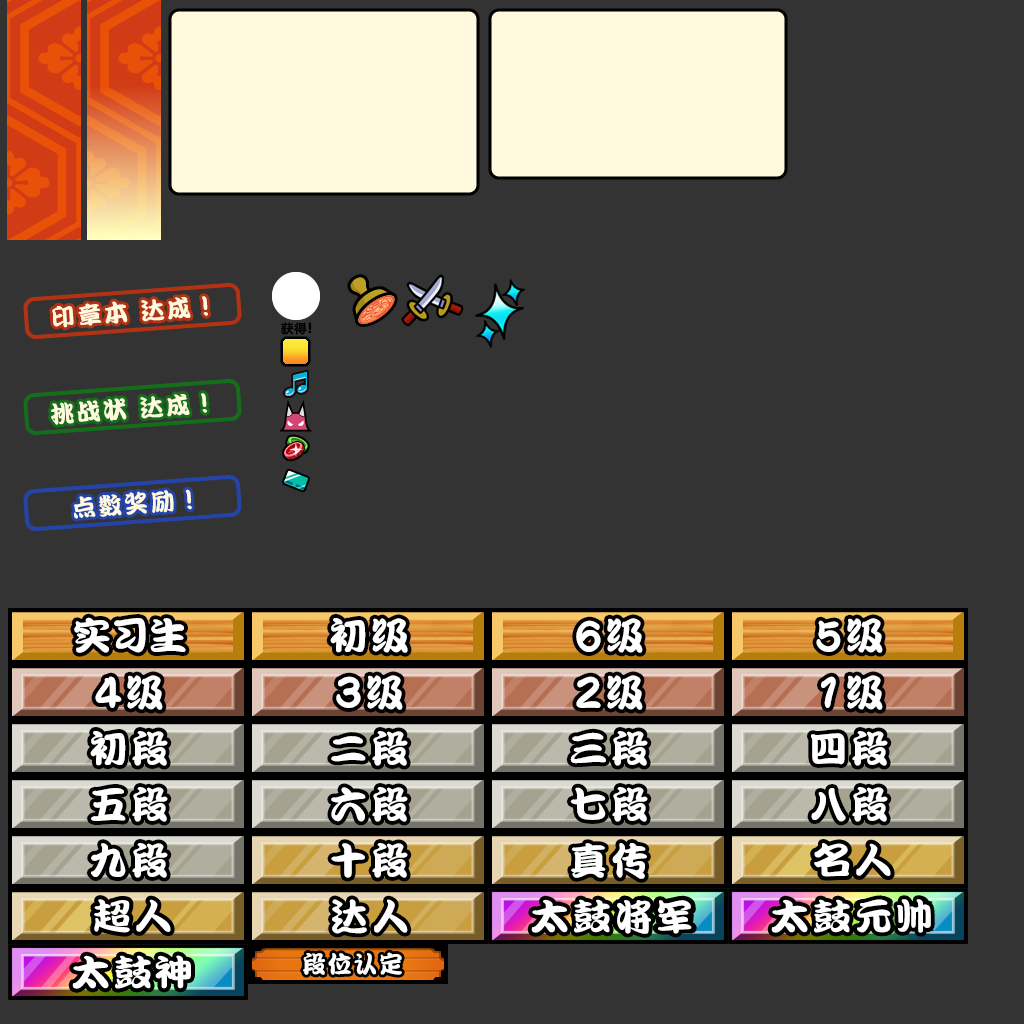
<style>
.page{position:relative;width:1024px;height:1024px;background:#333333}
.page>*{position:absolute;margin:0}
.t1{font:24px "DFPKanTingLiuW9";letter-spacing:0.1em;color:#fff9de}
.t2{font:12px "MicrosoftYaHei";letter-spacing:0.07em;color:#000000;font-weight:bold}
.t3{font:13px "MicrosoftYaHei";letter-spacing:0.07em;color:#000000;font-weight:bold}
.t4{font:24px "DFPKanTingLiuW9";color:#fff9de}
.t5{font:38px "DFPKanTingLiuW9";color:#ffffff}
.t6{font:38px "DFPKanTingLiuW9";letter-spacing:0.09em;color:#ffffff}
.t7{font:45.6px "DFPKanTingLiuW9";letter-spacing:0.09em;color:#ffffff;scale:0.83 1}
.t8{font:37px "DFPKanTingLiuW9";letter-spacing:0.09em;color:#ffffff}
.t9{font:24px "DFPKanTingLiuW9";letter-spacing:0.07em;color:#ffffff}
</style>
<div class="page">
<p class="t1" style="left:52px;top:296px;width:156px;height:32px;rotate:-4deg">印章本 达成！</p>
<p class="t2" style="left:281px;top:322px;width:30px;height:13px">获得<span class="t3">!</span></p>
<p class="t1" style="left:51px;top:393px;width:156px;height:32px;rotate:-4deg">挑战状 达成！</p>
<p class="t1" style="left:74px;top:489px;width:118px;height:30px;rotate:-4deg">点数奖励<span class="t4">！</span></p>
<p class="t5" style="left:74px;top:617px;width:112px;height:36px">实习生</p>
<p class="t6" style="left:330px;top:618px;width:78px;height:35px">初级</p>
<p class="t7" style="left:576px;top:618px;width:67px;height:35px">6<span class="t6">级</span></p>
<p class="t7" style="left:816px;top:618px;width:67px;height:35px">5<span class="t6">级</span></p>
<p class="t7" style="left:95px;top:675px;width:68px;height:35px">4<span class="t6">级</span></p>
<p class="t7" style="left:336px;top:675px;width:67px;height:35px">3<span class="t6">级</span></p>
<p class="t7" style="left:576px;top:675px;width:67px;height:35px">2<span class="t6">级</span></p>
<p class="t7" style="left:821px;top:675px;width:62px;height:35px">1<span class="t6">级</span></p>
<p class="t6" style="left:90px;top:731px;width:78px;height:35px">初段</p>
<p class="t6" style="left:331px;top:731px;width:77px;height:35px">二段</p>
<p class="t6" style="left:570px;top:731px;width:78px;height:35px">三段</p>
<p class="t6" style="left:811px;top:731px;width:77px;height:35px">四段</p>
<p class="t6" style="left:91px;top:787px;width:77px;height:35px">五段</p>
<p class="t6" style="left:331px;top:787px;width:77px;height:35px">六段</p>
<p class="t6" style="left:570px;top:787px;width:78px;height:35px">七段</p>
<p class="t6" style="left:811px;top:787px;width:77px;height:35px">八段</p>
<p class="t6" style="left:91px;top:843px;width:77px;height:35px">九段</p>
<p class="t6" style="left:331px;top:843px;width:77px;height:35px">十段</p>
<p class="t6" style="left:571px;top:843px;width:76px;height:36px">真传</p>
<p class="t6" style="left:332px;top:899px;width:76px;height:35px">达人</p>
<p class="t8" style="left:617px;top:900px;width:75px;height:34px">将军</p>
<p class="t8" style="left:857px;top:899px;width:74px;height:34px">元帅</p>
<p class="t9" style="left:303px;top:952px;width:99px;height:23px">段位认定</p>
</div>
